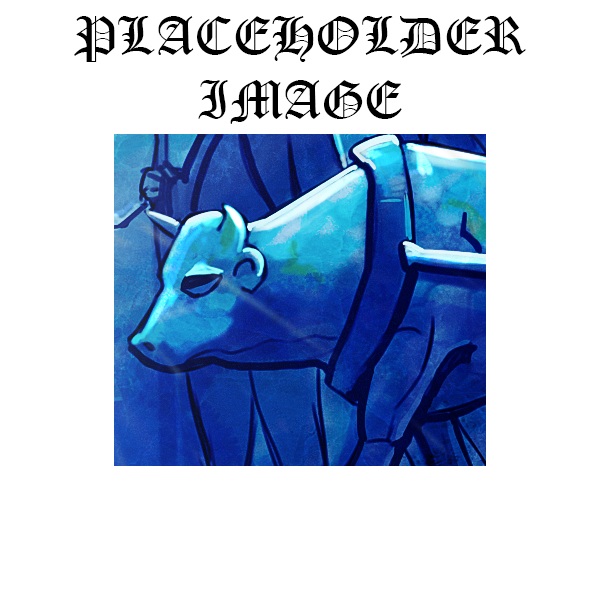
<style>
.page{position:relative;width:600px;height:600px;background:#ffffff}
.page>*{position:absolute;margin:0}
.t1{font:52.8px "OldEnglishTextMT";color:#000000}
</style>
<div class="page">
<p class="t1" style="left:74px;top:16px;width:452px;height:108px;text-align:center">PLACEHOLDER<br>IMAGE</p>
</div>
